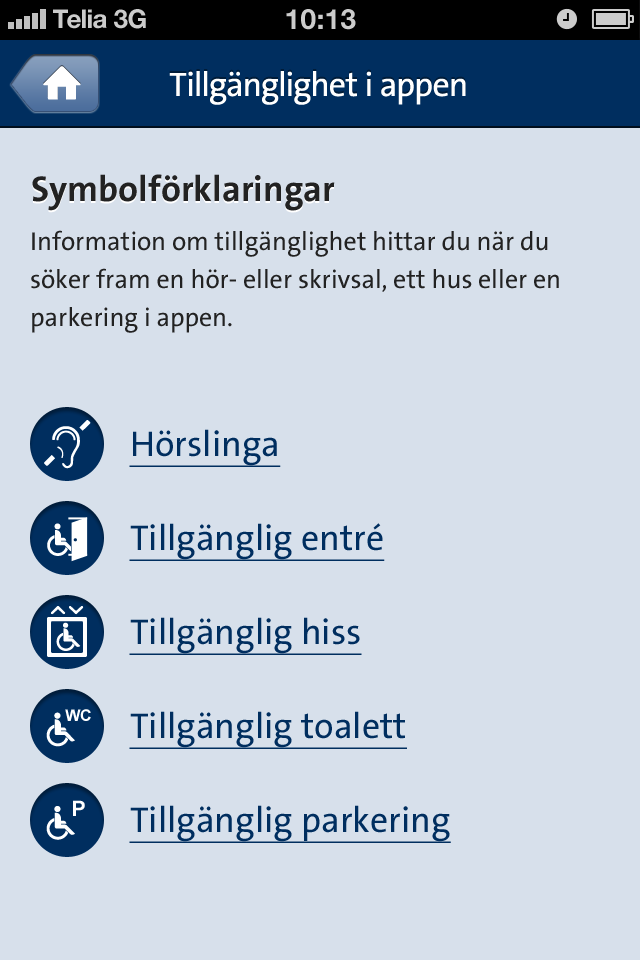
<style>
.page{position:relative;width:640px;height:960px;background:#d7e0eb}
.page>*{position:absolute;margin:0}
.t1{font:26px "HelveticaNeue-Bold";color:#cccccc}
.t2{font:26px "HelveticaNeue-Bold";color:#cccccc;text-transform:uppercase}
.t3{font:28px "HelveticaNeue-Bold";color:#cccccc;text-transform:uppercase}
.t4{font:34px "TheSansB-W5Plain";letter-spacing:-0.015em;color:#ffffff}
.t5{font:36px "TheSansB-W7Bold";color:#222222}
.t6{font:26px/38px "TheSansB-W5Plain";color:#222222}
.t7{font:36px/94px "TheSansB-W5Plain";color:#002e5f;text-decoration:underline}
.t8{font:16px "Arial-BoldMT";color:#ffffff}
.t9{font:21.4px "Arial-BoldMT";color:#ffffff}
</style>
<div class="page">
<p class="t1" style="left:53px;top:9px;width:54px;height:20px">Telia</p>
<p class="t2" style="left:114px;top:9px;width:32px;height:20px">3G</p>
<p class="t3" style="left:286px;top:9px;width:70px;height:21px">10:13</p>
<p class="t4" style="left:169px;top:71px;width:297px;height:34px">Tillgänglighet i appen</p>
<p class="t5" style="left:32px;top:174px;width:303px;height:37px">Symbolförklaringar</p>
<p class="t6" style="left:31px;top:230px;width:528px;height:103px">Information om tillgänglighet hittar du när du söker fram en hör- eller skrivsal, ett hus eller en parkering i appen.</p>
<p class="t7" style="left:129px;top:429px;width:322px;height:414px">Hörslinga<br>Tillgänglig entré<br>Tillgänglig hiss<br>Tillgänglig toalett<br>Tillgänglig parkering</p>
<p class="t8" style="left:65px;top:709px;width:26px;height:12px">WC</p>
<p class="t9" style="left:73px;top:800px;width:12px;height:16px">P</p>
</div>
